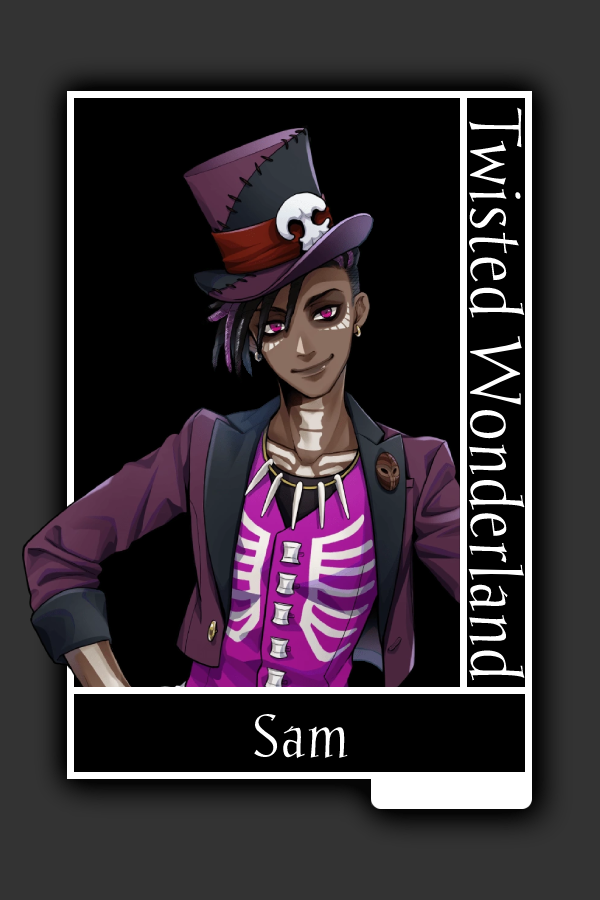
<style>
.page{position:relative;width:600px;height:900px;background:#000000}
.page>*{position:absolute;margin:0}
.t1{font:60px "Chantelli-Antiqua";color:#ffffff}
.t2{font:50px "Chantelli-Antiqua";color:#ffffff}
</style>
<div class="page">
<p class="t1" style="left:468px;top:107px;width:57px;height:574px;rotate:90deg">Twisted Wonderland</p>
<p class="t2" style="left:254px;top:712px;width:94px;height:47px">Sam</p>
</div>
